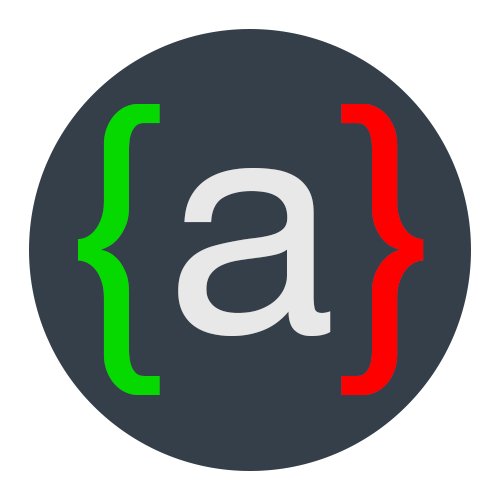
<style>
.page{position:relative;width:500px;height:500px;background:#343f4a}
.page>*{position:absolute;margin:0}
.t1{font:312.5px "HelveticaNeue";color:#05d900}
.t2{font:312.5px "HelveticaNeue";color:#e8e8e8}
.t3{font:312.5px "HelveticaNeue";color:#ff0000}
</style>
<div class="page">
<p class="t1" style="left:78px;top:104px;width:346px;height:291px">{<span class="t2">a</span><span class="t3">}</span></p>
</div>
